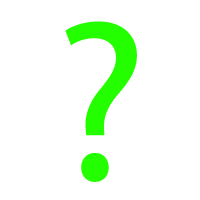
<style>
.page{position:relative;width:200px;height:200px;background:#ffffff}
.page>*{position:absolute;margin:0}
.t1{font:230px "MyriadPro-Regular";color:#24ff00}
</style>
<div class="page">
<p class="t1" style="left:65px;top:21px;width:72px;height:161px">?</p>
</div>
